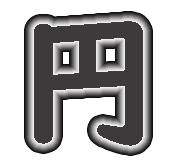
<style>
.page{position:relative;width:178px;height:164px;background:#ffffff}
.page>*{position:absolute;margin:0}
.t1{font:150px "UDDigiKyokashoNK-B";color:#3c3a3a}
</style>
<div class="page">
<p class="t1" style="left:34px;top:21px;width:109px;height:125px">円</p>
</div>
